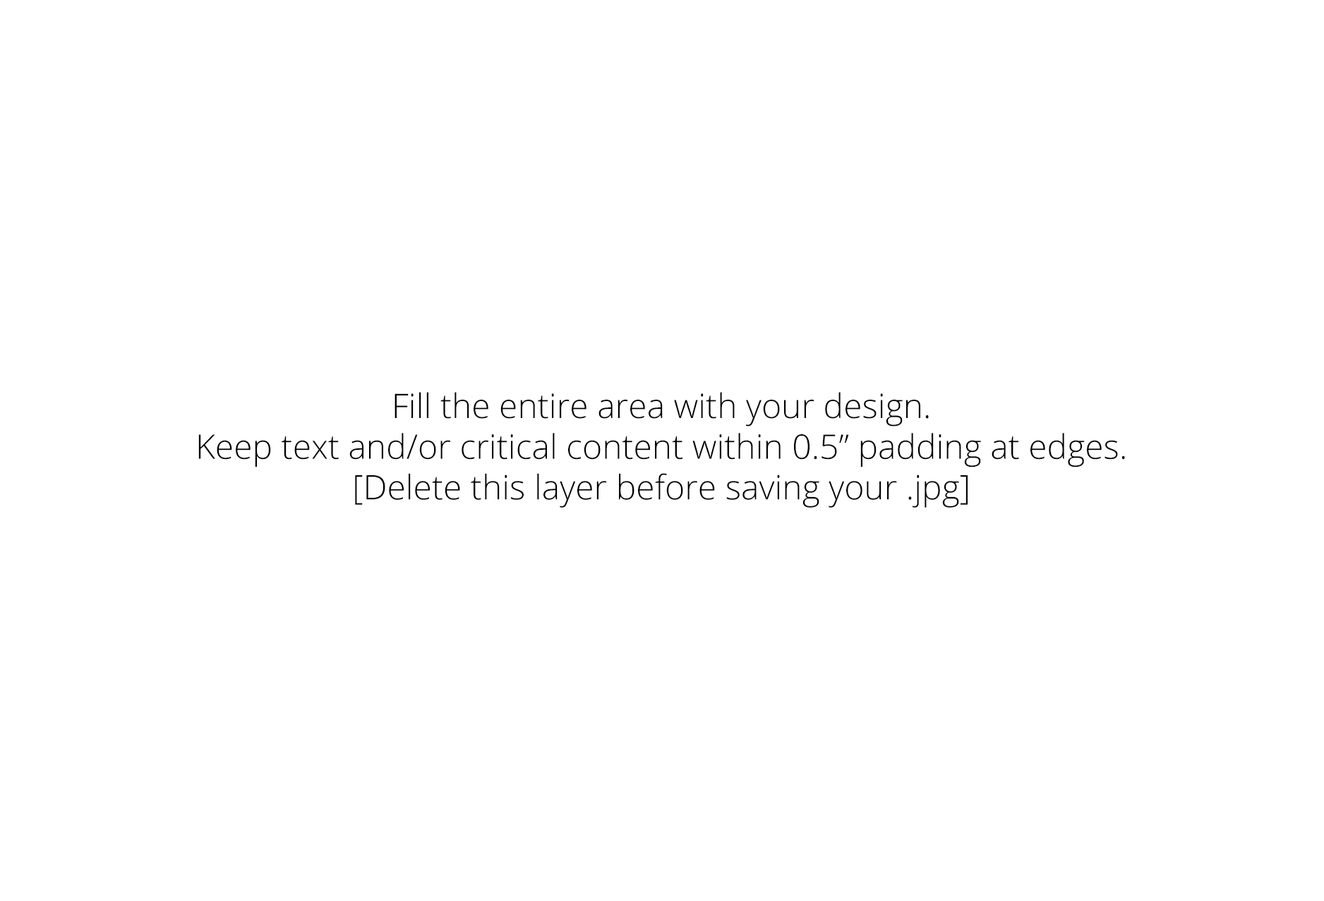
<style>
.page{position:relative;width:1324px;height:901px;background:#ffffff}
.page>*{position:absolute;margin:0}
.t1{font:33.9px "OpenSans-Light";color:#000000}
</style>
<div class="page">
<p class="t1" style="left:198px;top:392px;width:927px;height:115px;text-align:center">Fill the entire area with your design.<br>Keep text and/or critical content within 0.5” padding at edges.<br>[Delete this layer before saving your .jpg]</p>
</div>
